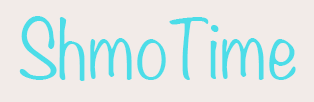
<style>
.page{position:relative;width:314px;height:102px;background:#f2ebe8}
.page>*{position:absolute;margin:0}
.t1{font:72px "Noteworthy-Light";color:#4cdde8}
</style>
<div class="page">
<p class="t1" style="left:19px;top:16px;width:277px;height:65px">ShmoTime</p>
</div>
